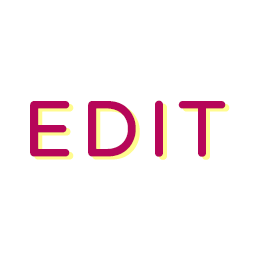
<style>
.page{position:relative;width:256px;height:256px;background:#ffffff}
.page>*{position:absolute;margin:0}
.t1{font:80px "jf-openhuninn-1.0";letter-spacing:0.075em;color:#b60659;font-weight:bold}
</style>
<div class="page">
<p class="t1" style="left:30px;top:100px;width:196px;height:57px">EDIT</p>
</div>
